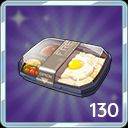
<style>
.page{position:relative;width:128px;height:128px}
.page>*{position:absolute;margin:0}
.t1{font:20px "Quicksand-Medium";color:#ffffff}
</style>
<div class="page">
<p class="t1" style="left:89px;top:103px;width:30px;height:14px">130</p>
</div>
